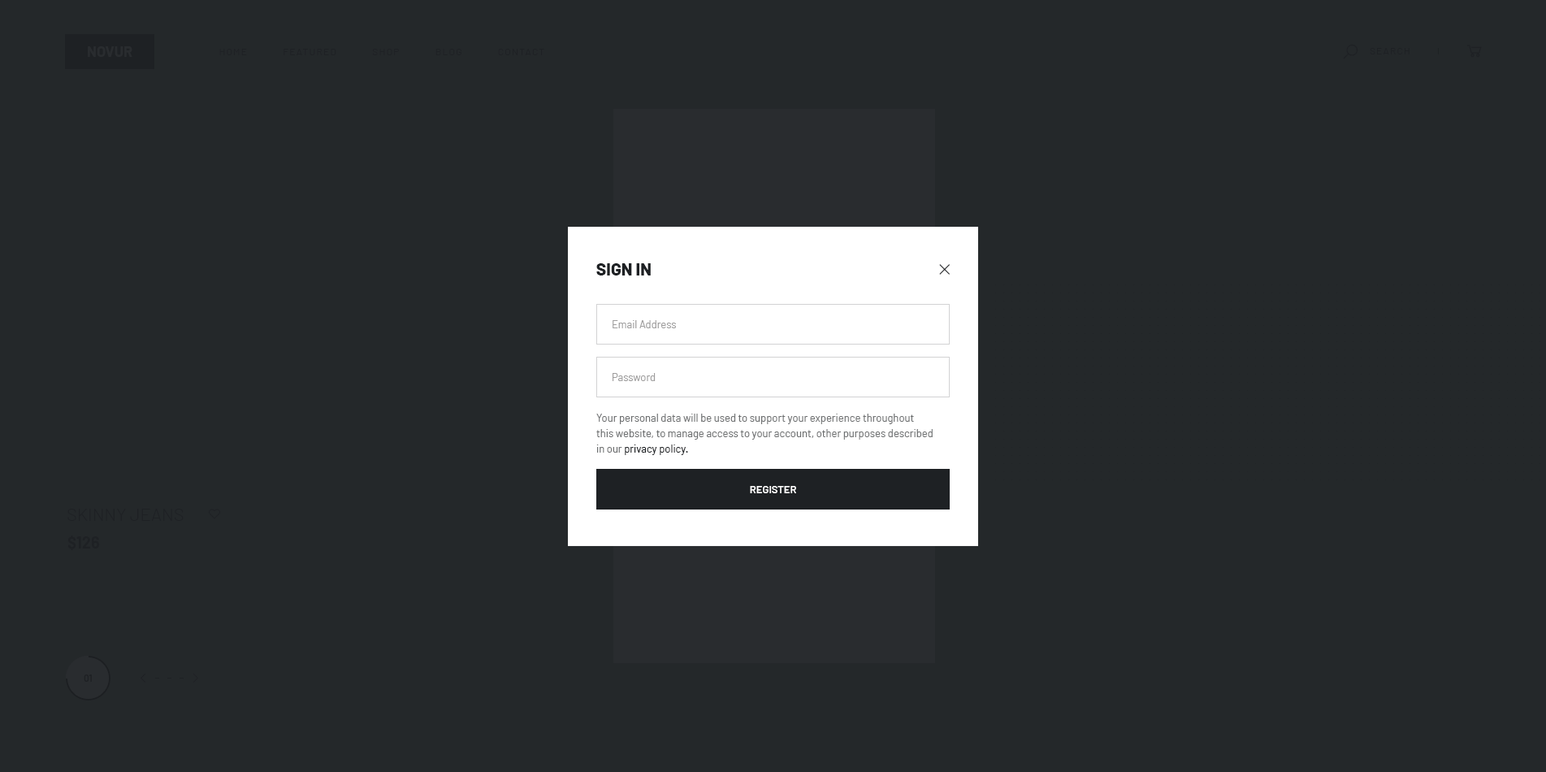
<style>
.page{position:relative;width:1546px;height:772px;background:#24282a}
.page>*{position:absolute;margin:0}
.t1{font:14.6px "Barlow-Bold";color:#292c2f;text-transform:uppercase}
.t2{font:9.7px "Barlow-Regular";letter-spacing:0.1em;color:#1e2124;text-transform:uppercase}
.t3{font:17.1px "Barlow-ExtraBold";color:#1e2124;text-transform:uppercase}
.t4{font:10.6px "Barlow-Regular";color:#9e9d9d}
.t5{font:10.6px/15.4px "Barlow-Regular";color:#6e7071}
.t6{font:10.6px/15.4px "Barlow-Regular";color:#1e2124}
.t7{font:10.6px "Barlow-SemiBold";color:#ffffff;text-transform:uppercase}
.t8{font:17.9px "Barlow-Light";color:#1e2124;text-transform:uppercase}
.t9{font:16.2px "Barlow-Bold";color:#1e2124}
.t10{font:9.7px "Barlow-Bold";color:#1e2124;text-transform:uppercase}
</style>
<div class="page">
<p class="t1" style="left:88px;top:46px;width:44px;height:11px">novur</p>
<p class="t2" style="left:219px;top:49px;width:325px;height:6px">Home            Featured            Shop            Blog            Contact</p>
<p class="t2" style="left:1369px;top:48px;width:40px;height:6px">Search</p>
<p class="t3" style="left:596px;top:263px;width:55px;height:12px">Sign in</p>
<p class="t4" style="left:612px;top:320px;width:64px;height:8px">Email Address</p>
<p class="t4" style="left:612px;top:373px;width:43px;height:8px">Password</p>
<p class="t5" style="left:596px;top:413px;width:336px;height:42px">Your personal data will be used to support your experience throughout <br>this website, to manage access to your account, other purposes described <br>in our <span class="t6">privacy policy.</span></p>
<p class="t7" style="left:750px;top:486px;width:46px;height:7px">Register</p>
<p class="t8" style="left:67px;top:508px;width:117px;height:13px">SKINNY JEANS</p>
<p class="t9" style="left:67px;top:535px;width:33px;height:15px">$126</p>
<p class="t10" style="left:84px;top:674px;width:8px;height:7px">01</p>
</div>
